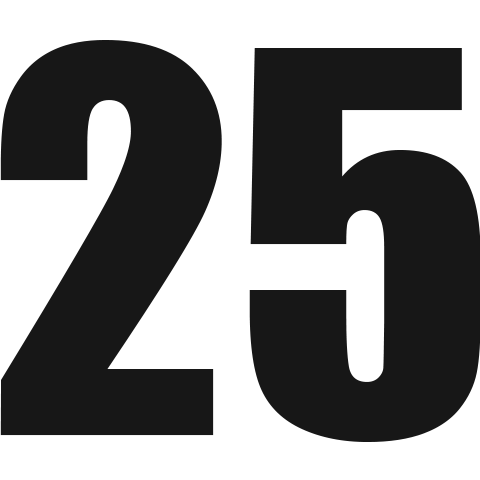
<style>
.page{position:relative;width:480px;height:480px;background:#171717}
.page>*{position:absolute;margin:0}
.t1{font:490.3px "Impact";color:#171717}
</style>
<div class="page">
<p class="t1" style="left:0px;top:40px;width:481px;height:402px">25</p>
</div>
